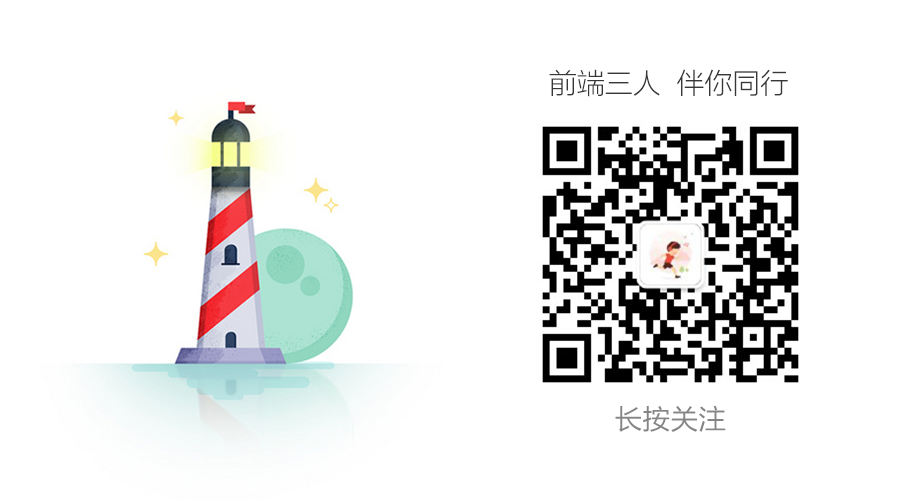
<style>
.page{position:relative;width:900px;height:500px;background:#ffffff}
.page>*{position:absolute;margin:0}
.t1{font:28px "FZLTHEL_SC--GB1-4";color:#373737}
.t2{font:28px "FZLTHJW--GB1-0";color:#858585}
</style>
<div class="page">
<p class="t1" style="left:549px;top:69px;width:239px;height:28px">前端三人  伴你同行</p>
<p class="t2" style="left:615px;top:405px;width:111px;height:27px">长按关注</p>
</div>
